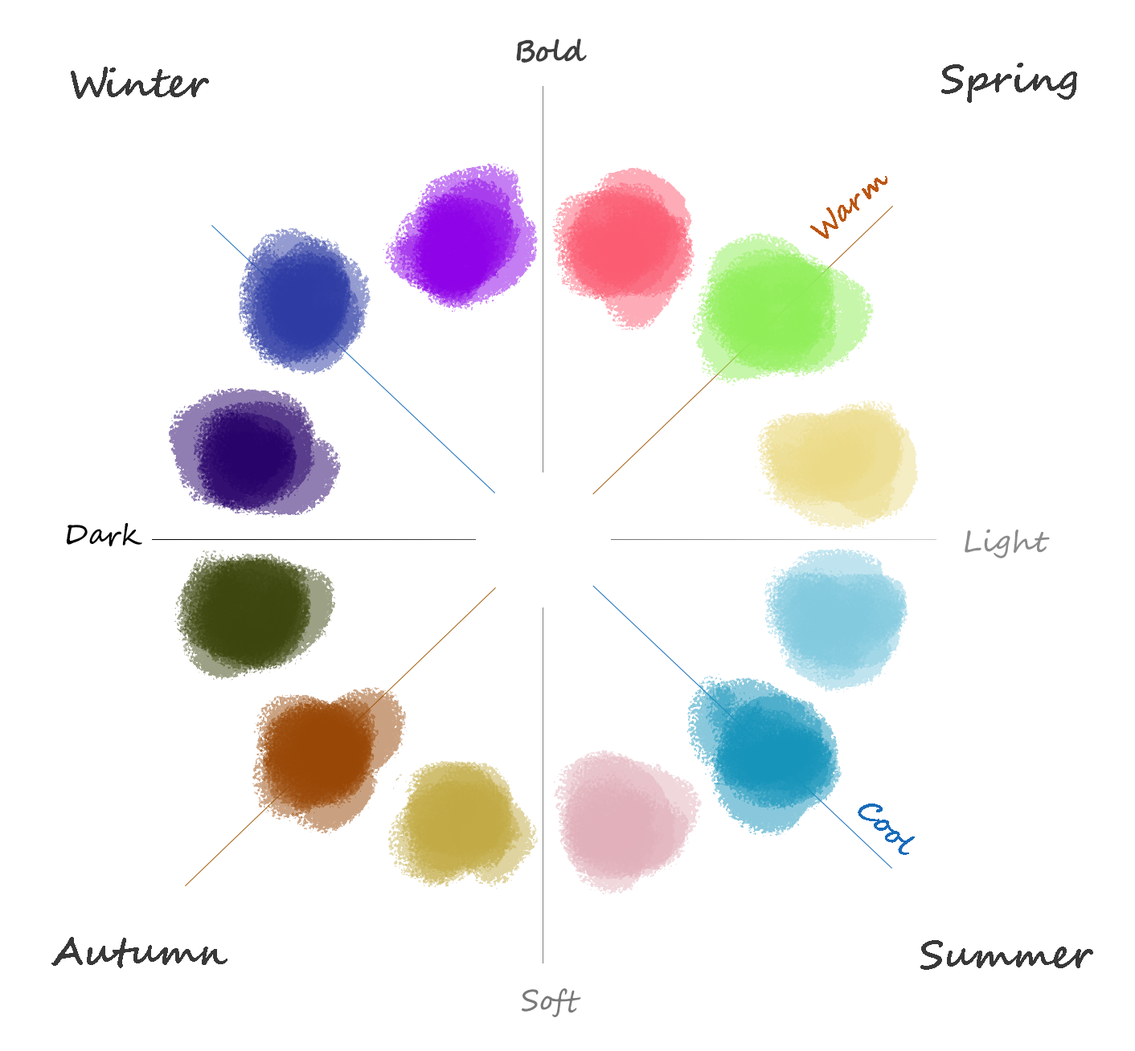
<style>
.page{position:relative;width:1135px;height:1051px;background:#ffffff}
.page>*{position:absolute;margin:0}
.t1{font:28.9px "SegoeScript-Bold";color:#3e3e3e}
.t2{font:38.6px "SegoeScript-Bold";color:#383838}
.t3{font:28.9px "SegoeScript-Bold";color:#bc5612}
.t4{font:28.9px "SegoeScript";color:#000000}
.t5{font:28.9px "SegoeScript";color:#8b8b8b}
.t6{font:28.9px "SegoeScript-Bold";color:#176bba}
.t7{font:28.9px "SegoeScript";color:#797979}
</style>
<div class="page">
<p class="t1" style="left:516px;top:39px;width:71px;height:24px">Bold</p>
<p class="t2" style="left:941px;top:63px;width:136px;height:40px">Spring</p>
<p class="t2" style="left:71px;top:67px;width:138px;height:32px">Winter</p>
<p class="t3" style="left:810px;top:176px;width:77px;height:63px;rotate:-41deg">Warm</p>
<p class="t4" style="left:66px;top:523px;width:76px;height:23px">Dark</p>
<p class="t5" style="left:964px;top:529px;width:85px;height:29px">Light</p>
<p class="t6" style="left:857px;top:804px;width:57px;height:51px;rotate:43deg">Cool</p>
<p class="t2" style="left:51px;top:937px;width:176px;height:31px">Autumn</p>
<p class="t2" style="left:920px;top:940px;width:173px;height:30px">Summer</p>
<p class="t7" style="left:521px;top:988px;width:60px;height:29px">Soft</p>
</div>
